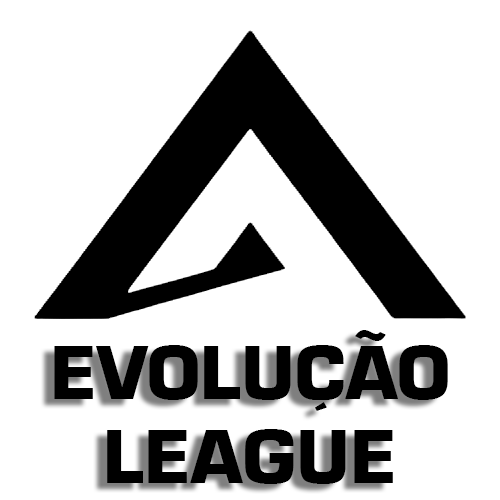
<style>
.page{position:relative;width:500px;height:500px;background:#ffffff}
.page>*{position:absolute;margin:0}
.t1{font:70px "Eurostile-Bold";color:#000000}
</style>
<div class="page">
<p class="t1" style="left:54px;top:330px;width:394px;height:154px;text-align:center">EVOLUÇÃO<br>LEAGUE</p>
</div>
